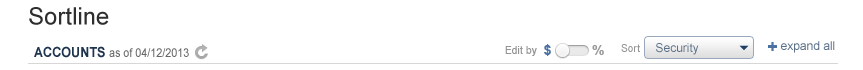
<style>
.page{position:relative;width:863px;height:70px;background:#ffffff}
.page>*{position:absolute;margin:0}
.t1{font:24px "ArialMT";color:#2e2e2e}
.t2{font:12px "ArialMT";color:#5a7088}
.t3{font:12px "ArialMT";color:#666666;scale:0.9 1}
.t4{font:14px "Arial-BoldMT";color:#1e334e;scale:0.9 1}
.t5{font:11px "ArialMT";letter-spacing:0.025em;color:#949494;scale:0.9 1}
.t6{font:14px "Arial-BoldMT";letter-spacing:0.01em;color:#4c72a1}
.t7{font:14px "Arial-BoldMT";letter-spacing:0.01em;color:#979797}
.t8{font:18px "Arial-BoldMT";color:#4c72a1}
</style>
<div class="page">
<p class="t1" style="left:29px;top:7px;width:80px;height:18px">Sortline</p>
<p class="t2" style="left:781px;top:41px;width:54px;height:12px">expand all</p>
<p class="t3" style="left:34px;top:46px;width:155px;height:12px"><span class="t4">ACCOUNTS </span>as of 04/12/2013</p>
<p class="t5" style="left:505px;top:46px;width:32px;height:10px">Edit by</p>
<p class="t6" style="left:544px;top:44px;width:60px;height:12px">$          <span class="t7">%</span></p>
<p class="t5" style="left:621px;top:44px;width:19px;height:8px">Sort</p>
<p class="t2" style="left:656px;top:43px;width:43px;height:12px">Security</p>
<p class="t8" style="left:768px;top:42px;width:9px;height:9px">+</p>
</div>
